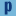
<style>
.page{position:relative;width:16px;height:16px;background:#77b7da}
.page>*{position:absolute;margin:0}
.t1{font:19.4px "BritannicBold";color:#113979;scale:0.76 1}
</style>
<div class="page">
<p class="t1" style="left:4px;top:1px;width:8px;height:14px">p</p>
</div>
